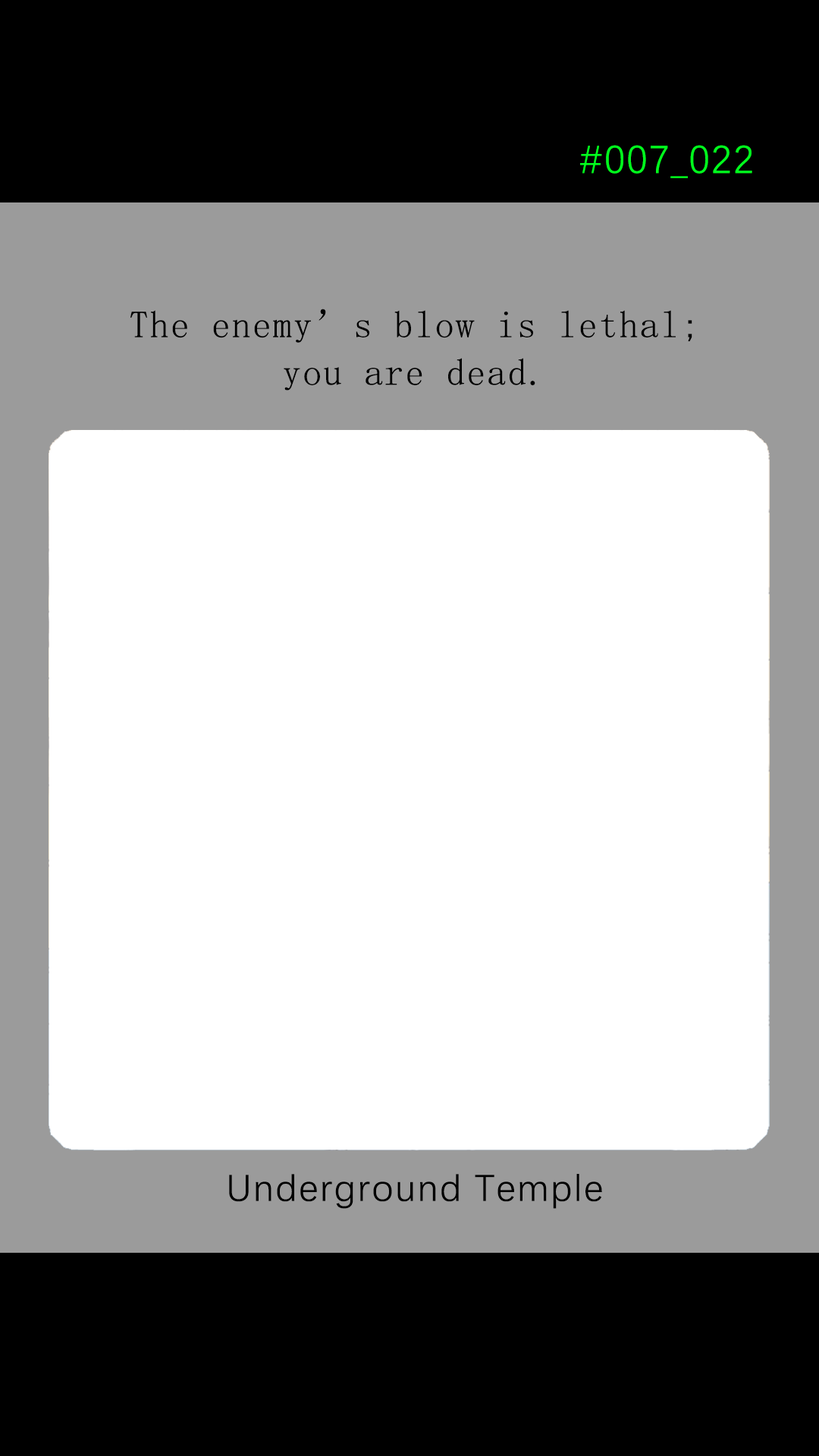
<style>
.page{position:relative;width:819px;height:1456px;background:#ffffff}
.page>*{position:absolute;margin:0}
.t1{font:39.2px "DengXian-Regular";letter-spacing:0.04em;color:#00ff1e}
.t2{font:37.9px/47.6px "SimSun";letter-spacing:0.04em;color:#000000}
.t3{font:37.9px "DengXian-Regular";letter-spacing:0.04em;color:#000000}
</style>
<div class="page">
<p class="t1" style="left:580px;top:145px;width:172px;height:33px">#007_022</p>
<p class="t2" style="left:130px;top:309px;width:562px;height:82px;text-align:center">The enemy’s blow is lethal;<br>you are dead.</p>
<p class="t3" style="left:229px;top:1174px;width:373px;height:35px">Underground Temple</p>
</div>
